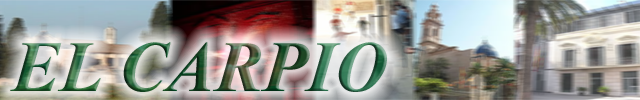
<style>
.page{position:relative;width:640px;height:100px}
.page>*{position:absolute;margin:0}
.t1{font:72px "TimesNewRomanPS-BoldItalicMT"}
</style>
<div class="page">
<p class="t1" style="left:10px;top:42px;width:377px;height:50px">EL CARPIO</p>
</div>
